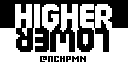
<style>
.page{position:relative;width:128px;height:64px;background:#ffffff}
.page>*{position:absolute;margin:0}
.t1{font:32.3px "Big-Apple-3PM";color:#ffffff}
.t2{font:32.3px "Big-Apple-3PM";color:#000000}
.t3{font:15.4px "Gamer";letter-spacing:0.02em;color:#000000}
</style>
<div class="page">
<p class="t1" style="left:15px;top:4px;width:97px;height:24px">HIGHER</p>
<p class="t2" style="left:16px;top:28px;width:93px;height:24px;rotate:180deg">LOWER</p>
<p class="t3" style="left:40px;top:56px;width:46px;height:6px">@ncHPMN</p>
</div>
